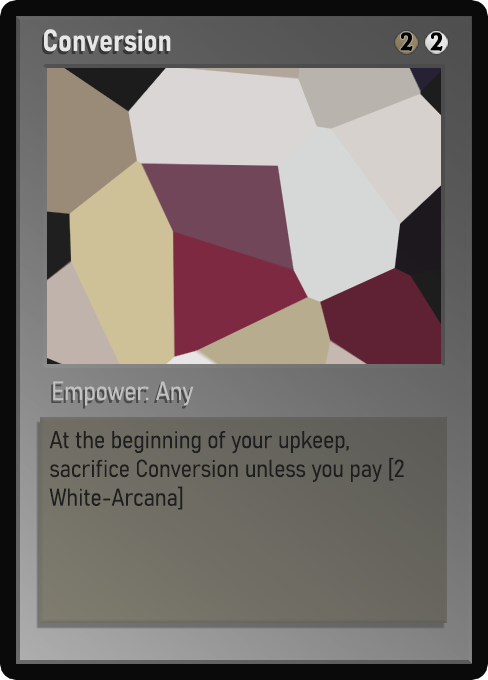
<style>
.page{position:relative;width:488px;height:680px}
.page>*{position:absolute;margin:0}
.t1{font:30px "Bahnschrift-SemiBoldSemiCondensed";color:#f2f2f2;font-weight:bold}
.t2{font:25px "WTRRoycroft";color:#000000;font-weight:bold;scale:1.09 1}
.t3{font:26px "Bahnschrift-LightSemiCondensed";color:#c8c8c8;font-weight:bold}
.t4{font:24px "Bahnschrift-LightSemiCondensed";color:#1e1e1e;font-weight:bold}
</style>
<div class="page">
<p class="t1" style="left:44px;top:29px;width:127px;height:23px;opacity:0.9">Conversion</p>
<p class="t2" style="left:400px;top:32px;width:13px;height:19px">2</p>
<p class="t2" style="left:430px;top:32px;width:13px;height:19px">2</p>
<p class="t3" style="left:53px;top:381px;width:141px;height:25px;opacity:0.9">Empower: Any</p>
<p class="t4" style="left:49px;top:431px;width:355px;height:79px">At the beginning of your upkeep, sacrifice Conversion unless you pay [2 White-Arcana]</p>
</div>
